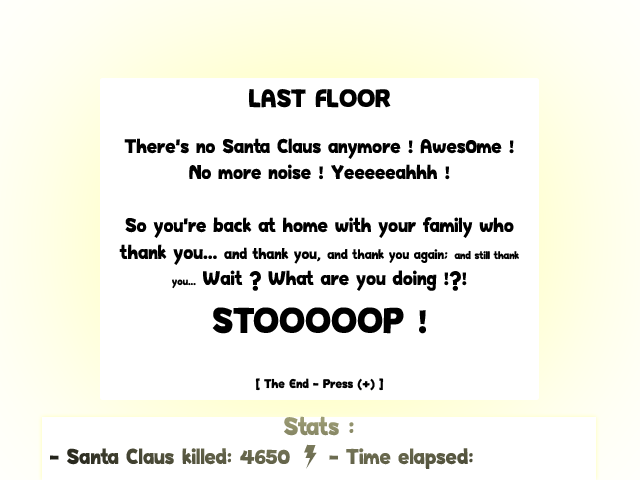
<style>
.page{position:relative;width:640px;height:480px;background:#ffffff}
.page>*{position:absolute;margin:0}
.t1{font:22px "HappyHell";color:#000000}
.t2{font:28px "HappyHell";color:#000000}
.t3{font:17px "HappyHell";color:#000000}
.t4{font:15px "HappyHell";color:#000000}
.t5{font:12px "HappyHell";color:#000000}
.t6{font:40px "HappyHell";color:#000000}
.t7{font:14px "HappyHell";color:#000000}
.t8{font:24px "HappyHell"}
.t9{font:28px "HappyHell"}
</style>
<div class="page">
<p class="t1" style="left:119px;top:89px;width:400px;height:302px;text-align:center"><span class="t2">LAST FLOOR<br><br></span>There's no Santa Claus anymore ! Awes0me ! No more noise ! Yeeeeeahhh !<br><br>So you're back at home with your family who thank you... <span class="t3">and thank you, </span><span class="t4">and thank you again; </span><span class="t5">and still thank you...</span> Wait ? What are you doing !?!<br><span class="t6">STOOOOOP !<br><br><br><br><br><br><br><br><br><br></span><span class="t7"><br>[ The End - Press (+) ]</span></p>
<p class="t8" style="left:50px;top:416px;width:423px;height:53px;text-align:center"><span class="t9">Stats :<br></span> - Santa Claus killed: 4650 | - Time elapsed:</p>
</div>
